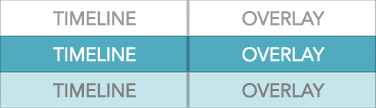
<style>
.page{position:relative;width:376px;height:108px;background:#ffffff}
.page>*{position:absolute;margin:0}
.t1{font:18.7px "AvenirNextLTPro-Regular";letter-spacing:-0.025em;color:#989898;text-transform:uppercase;font-weight:bold}
.t2{font:18.7px "AvenirNextLTPro-Regular";letter-spacing:-0.025em;color:#ffffff;text-transform:uppercase;font-weight:bold}
.t3{font:18.7px "AvenirNextLTPro-Regular";letter-spacing:-0.025em;color:#7f7f7f;text-transform:uppercase;font-weight:bold}
</style>
<div class="page">
<p class="t1" style="left:53px;top:11px;width:83px;height:15px">timeline</p>
<p class="t1" style="left:242px;top:11px;width:83px;height:15px">overlay</p>
<p class="t2" style="left:53px;top:47px;width:83px;height:15px">timeline</p>
<p class="t2" style="left:242px;top:47px;width:83px;height:15px">overlay</p>
<p class="t3" style="left:53px;top:83px;width:83px;height:15px">timeline</p>
<p class="t3" style="left:242px;top:83px;width:83px;height:15px">overlay</p>
</div>
